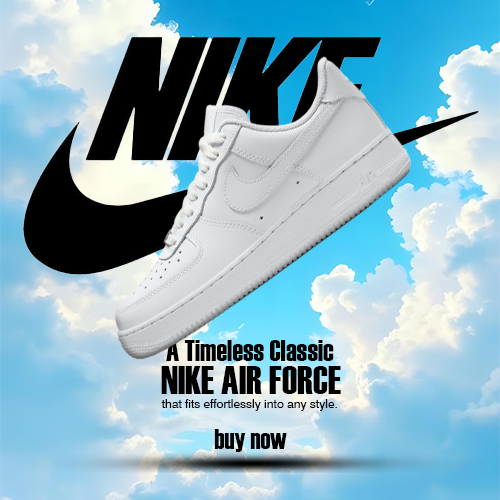
<style>
.page{position:relative;width:500px;height:500px}
.page>*{position:absolute;margin:0}
.t1{font:30px "Haettenschweiler";color:#000000}
.t2{font:40px "Haettenschweiler";color:#000000}
.t3{font:12px "Swiss721BT-Roman";color:#000000}
.t4{font:28px "Haettenschweiler";color:#000000}
</style>
<div class="page">
<p class="t1" style="left:166px;top:340px;width:168px;height:21px">A Timeless Classic</p>
<p class="t2" style="left:161px;top:366px;width:180px;height:28px">NIKE AIR FORCE</p>
<p class="t3" style="left:161px;top:399px;width:176px;height:12px">that fits effortlessly into any style.</p>
<p class="t4" style="left:214px;top:429px;width:73px;height:23px">buy now</p>
</div>
